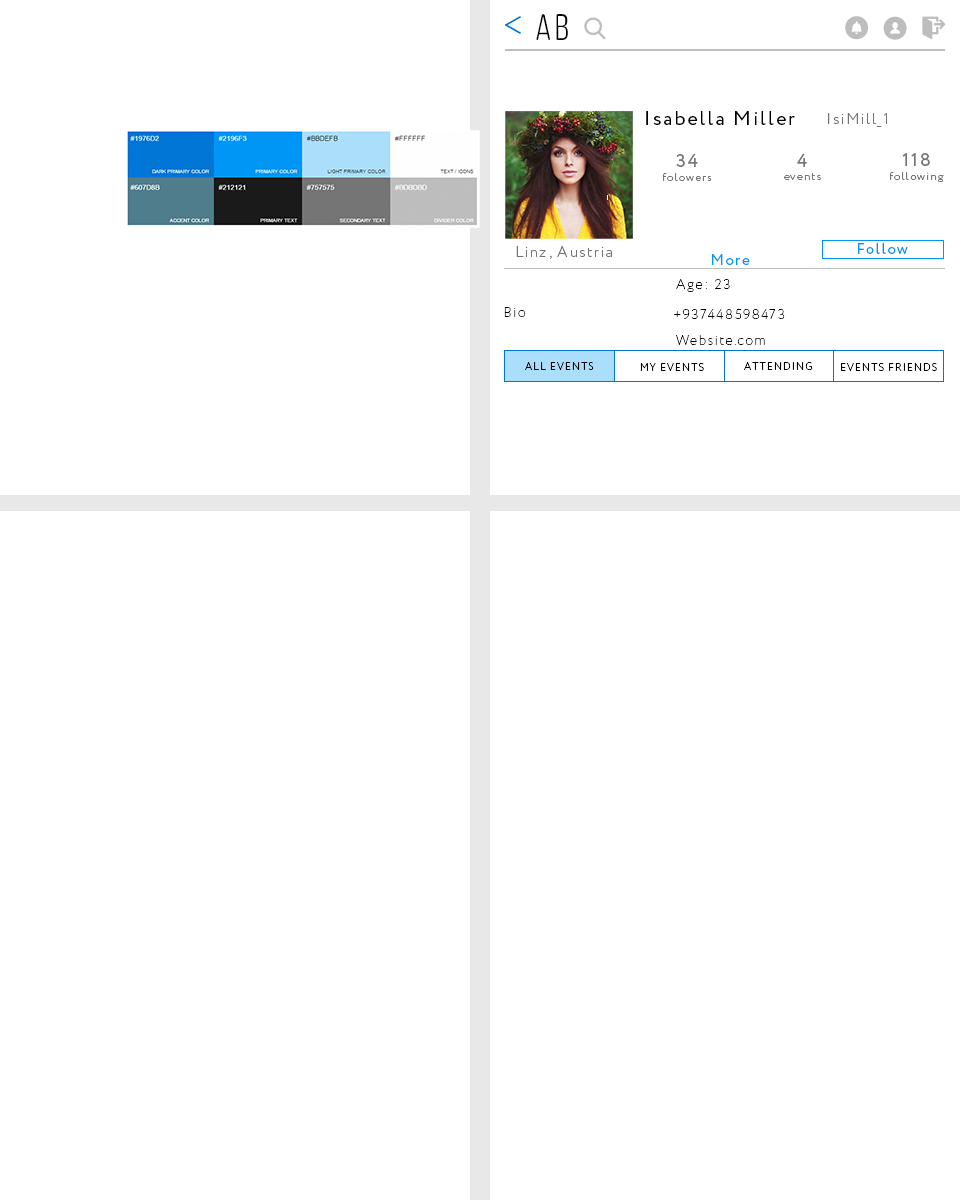
<style>
.page{position:relative;width:960px;height:1200px;background:#ffffff}
.page>*{position:absolute;margin:0}
.t1{font:37px "ClutchSans-Regular";letter-spacing:0.1em;color:#000000}
.t2{font:20px "Circe-Regular";letter-spacing:0.1em;color:#000000}
.t3{font:18.6px "Circe-Regular";letter-spacing:0.1em;color:#000000}
.t4{font:15px "Circe-Light";letter-spacing:0.1em;color:#747474}
.t5{font:11.3px "Circe-Light";letter-spacing:0.1em;color:#757575}
.t6{font:18.6px "Circe-Regular";letter-spacing:0.1em;color:#757575}
.t7{font:15px "Circe-Regular";letter-spacing:0.1em;color:#0096f5}
.t8{font:15px "Circe-Regular";letter-spacing:0.1em;color:#0097f6}
.t9{font:13.7px "Circe-ExtraLight";letter-spacing:0.1em;color:#000000}
.t10{font:10.3px "Circe-Light";letter-spacing:0.1em;color:#000000}
</style>
<div class="page">
<p class="t1" style="left:536px;top:14px;width:32px;height:26px">Ab</p>
<p class="t2" style="left:646px;top:111px;width:149px;height:14px"><span class="t3"> </span>Isabella Miller</p>
<p class="t4" style="left:828px;top:113px;width:59px;height:14px">IsiMill_1</p>
<p class="t5" style="left:663px;top:154px;width:49px;height:27px;text-align:center"><span class="t6">34<br></span>folowers</p>
<p class="t5" style="left:784px;top:154px;width:37px;height:26px;text-align:center"><span class="t6">4<br></span>events</p>
<p class="t5" style="left:890px;top:153px;width:54px;height:29px;text-align:center"><span class="t6">118<br></span>following</p>
<p class="t4" style="left:516px;top:246px;width:96px;height:13px">Linz, Austria</p>
<p class="t7" style="left:858px;top:243px;width:50px;height:11px">Follow</p>
<p class="t8" style="left:712px;top:254px;width:38px;height:11px">More</p>
<p class="t9" style="left:676px;top:279px;width:54px;height:13px">Age: 23</p>
<p class="t9" style="left:504px;top:307px;width:22px;height:10px">Bio</p>
<p class="t9" style="left:674px;top:309px;width:111px;height:10px">+937448598473</p>
<p class="t9" style="left:676px;top:335px;width:89px;height:10px">Website.com</p>
<p class="t10" style="left:525px;top:362px;width:69px;height:8px">ALL EVENTS</p>
<p class="t10" style="left:640px;top:363px;width:64px;height:8px">MY EVENTS</p>
<p class="t10" style="left:744px;top:362px;width:69px;height:8px">ATTENDING</p>
<p class="t10" style="left:841px;top:363px;width:96px;height:8px">EVENTS FRIENDS</p>
</div>
